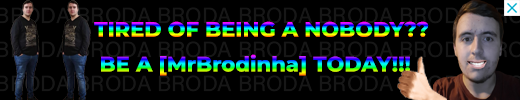
<style>
.page{position:relative;width:520px;height:100px;background:#000000}
.page>*{position:absolute;margin:0}
.t1{font:21px "MontserratRoman-ExtraBold"}
</style>
<div class="page">
<p class="t1" style="left:94px;top:21px;width:335px;height:16px">TIRED OF BEING A NOBODY??</p>
<p class="t1" style="left:101px;top:54px;width:309px;height:22px">BE A [MrBrodinha] TODAY!!!</p>
</div>
